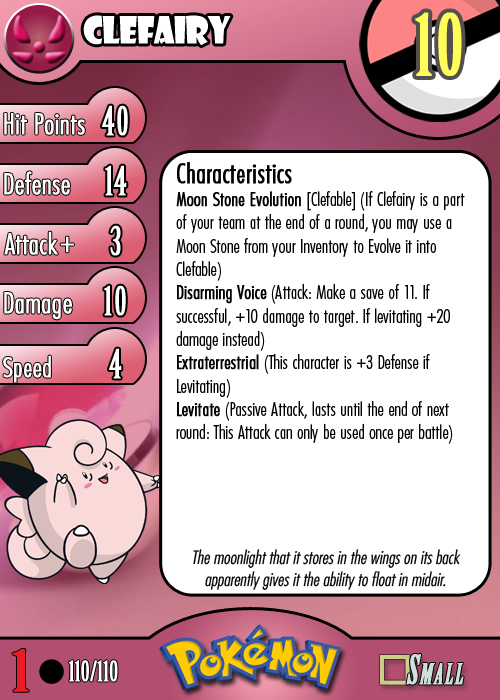
<style>
.page{position:relative;width:500px;height:700px;background:#ffffff}
.page>*{position:absolute;margin:0}
.t1{font:36.7px "ShowcardGothic-Reg";letter-spacing:-0.025em;color:#ffffff;scale:0.91 1}
.t2{font:83.3px "BirchStd";letter-spacing:0.025em;color:#fffd59;font-weight:bold}
.t3{font:27.8px "Futura-CondensedLight";color:#ffffff;font-weight:bold}
.t4{font:38.9px "BirchStd";letter-spacing:0.035em;color:#ffffff;font-weight:bold}
.t5{font:19.4px "FuturaCondensedBQ-Light";color:#010101}
.t6{font:27.8px "FuturaCondensedBQ-Light";color:#010101;font-weight:bold}
.t7{font:19.4px "FuturaCondensedBQ-Light";color:#010101;font-weight:bold}
.t8{font:30.6px "Futura-CondensedLight";color:#ffffff;font-weight:bold}
.t9{font:27.8px "FuturaCondensedBQ-Light";color:#ffffff;font-weight:bold}
.t10{font:18.1px "Futura-CondensedLight";color:#010101;font-style:italic}
.t11{font:55.6px "BirchStd";color:#ed1c24;font-weight:bold;scale:1.5 1}
.t12{font:27.8px "BirchStd";color:#ffffff;font-weight:bold}
</style>
<div class="page">
<p class="t1" style="left:83px;top:15px;width:148px;height:31px">clefairy</p>
<p class="t2" style="left:415px;top:12px;width:47px;height:64px">10</p>
<p class="t3" style="left:4px;top:113px;width:81px;height:22px">Hit Points</p>
<p class="t4" style="left:102px;top:105px;width:26px;height:31px">40</p>
<p class="t3" style="left:4px;top:171px;width:66px;height:24px">Defense</p>
<p class="t4" style="left:105px;top:165px;width:22px;height:31px">14</p>
<p class="t5" style="left:176px;top:162px;width:289px;height:282px"><span class="t6">Characteristics<br></span><span class="t7">Moon Stone Evolution </span>[Clefable] (If Clefairy is a part of your team at the end of a round, you may use a Moon Stone from your Inventory to Evolve it into Clefable)<br><span class="t7">Disarming Voice</span> (Attack: Make a save of 11. If successful, +10 damage to target. If levitating +20 damage instead)<br><span class="t7">Extraterrestrial</span> (This character is +3 Defense if Levitating)<br><span class="t7">Levitate</span> (Passive Attack, lasts until the end of next round: This Attack can only be used once per battle)</p>
<p class="t3" style="left:4px;top:231px;width:54px;height:24px">Attack</p>
<p class="t4" style="left:110px;top:225px;width:11px;height:31px">3</p>
<p class="t8" style="left:60px;top:236px;width:14px;height:17px">+</p>
<p class="t3" style="left:4px;top:292px;width:68px;height:28px">Damage</p>
<p class="t4" style="left:104px;top:285px;width:22px;height:31px">10</p>
<p class="t4" style="left:109px;top:348px;width:13px;height:31px">4</p>
<p class="t9" style="left:3px;top:355px;width:48px;height:28px">Speed</p>
<p class="t10" style="left:193px;top:549px;width:268px;height:41px;text-align:center">The moonlight that it stores in the wings on its back apparently gives it the ability to float in midair.</p>
<p class="t11" style="left:12px;top:649px;width:17px;height:43px">1</p>
<p class="t12" style="left:68px;top:660px;width:50px;height:22px">110/110</p>
</div>
